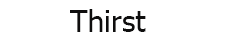
<style>
.page{position:relative;width:240px;height:40px;background:#ffffff}
.page>*{position:absolute;margin:0}
.t1{font:30px "Tahoma";color:#0f0e0e}
</style>
<div class="page">
<p class="t1" style="left:70px;top:9px;width:76px;height:23px">Thirst</p>
</div>
